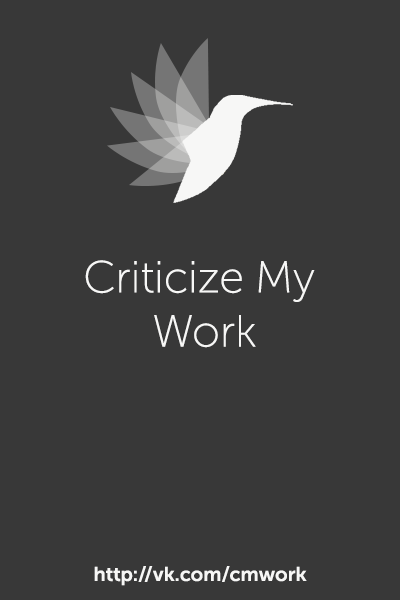
<style>
.page{position:relative;width:400px;height:600px;background:#383838}
.page>*{position:absolute;margin:0}
.t1{font:45px "MuseoSansCyrl-100";color:#f7f7f6}
.t2{font:20px "MuseoSansCyrl-700";color:#f7f7f6}
</style>
<div class="page">
<p class="t1" style="left:85px;top:260px;width:230px;height:88px;text-align:center">Criticize My <br>Work</p>
<p class="t2" style="left:94px;top:566px;width:213px;height:20px">http://vk.com/cmwork</p>
</div>
